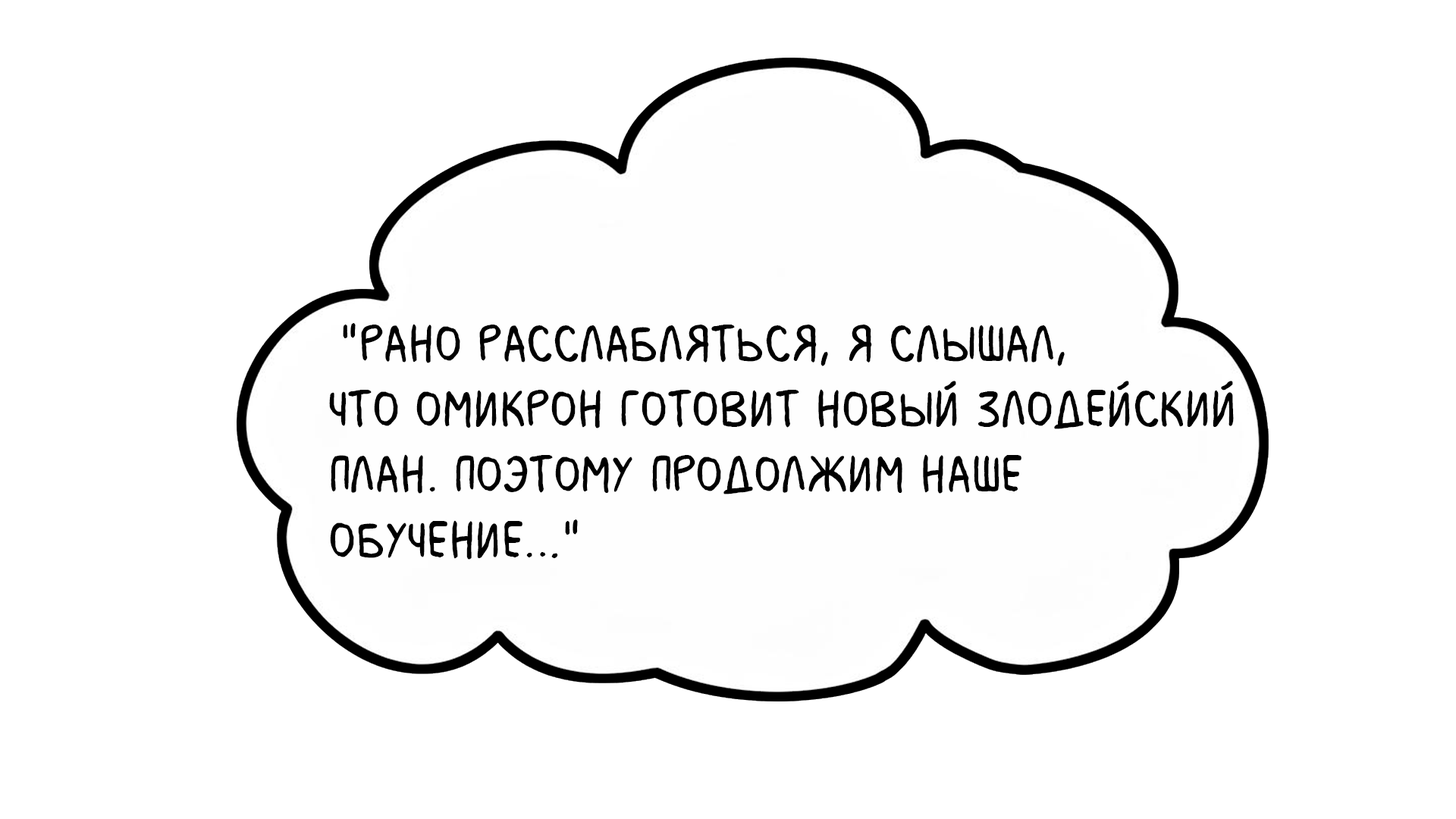
<style>
.page{position:relative;width:1456px;height:819px;background:#ffffff}
.page>*{position:absolute;margin:0}
.t1{font:54.6px "MilkMustacheBB";color:#000000}
.t2{font:54.6px "MyriadPro-Regular";color:#000000}
</style>
<div class="page">
<p class="t1" style="left:329px;top:323px;width:905px;height:237px"><span class="t2"> </span>"Рано расслабляться, я слышал, <br>что Омикрон готовит новый злодейский <br>план. Поэтому продолжим наше <br>обучение…"</p>
</div>
